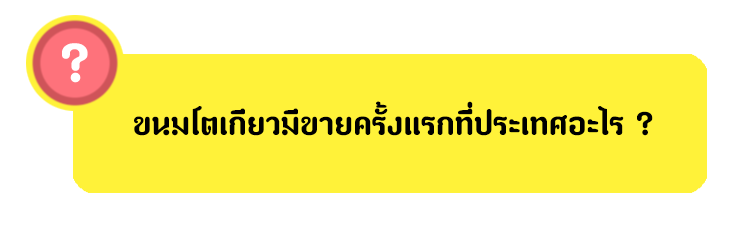
<style>
.page{position:relative;width:747px;height:227px;background:#fff239}
.page>*{position:absolute;margin:0}
.t1{font:80px "paaymaay";color:#ffffff}
.t2{font:48px "paaymaay";color:#000000}
</style>
<div class="page">
<p class="t1" style="left:62px;top:43px;width:26px;height:40px">?</p>
<p class="t2" style="left:134px;top:101px;width:519px;height:35px">ขนมโตเกียวมีขายครั้งแรกที่ประเทศอะไร ?</p>
</div>
